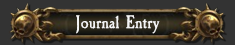
<style>
.page{position:relative;width:235px;height:45px;background:#333333}
.page>*{position:absolute;margin:0}
.t1{font:19px "CaslonAntique";color:#f5f5f5}
</style>
<div class="page">
<p class="t1" style="left:76px;top:15px;width:84px;height:19px">Journal Entry</p>
</div>
